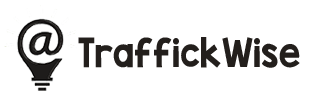
<style>
.page{position:relative;width:311px;height:100px;background:#ffffff}
.page>*{position:absolute;margin:0}
.t1{font:34.2px "KGBlankSpaceSolid";color:#231f1c;scale:0.92 1}
</style>
<div class="page">
<p class="t1" style="left:78px;top:37px;width:222px;height:31px">TraffickWise</p>
</div>
